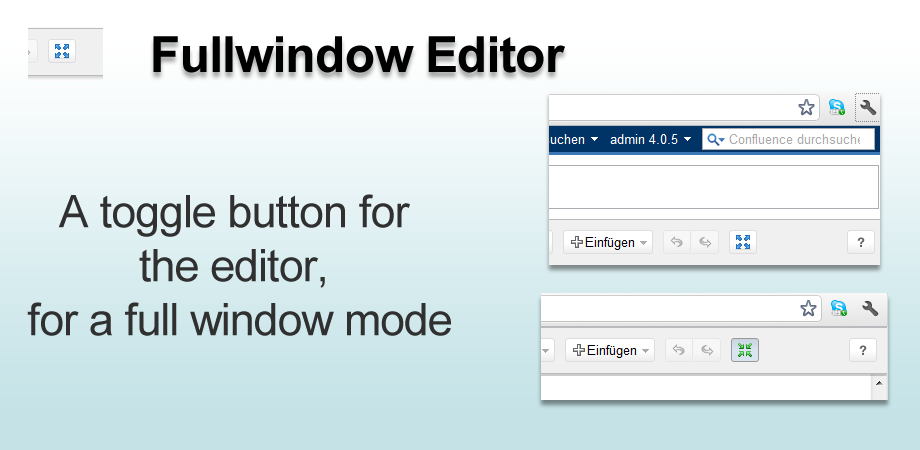
<style>
.page{position:relative;width:920px;height:450px;background:#ffffff}
.page>*{position:absolute;margin:0}
.t1{font:50px "Arial-BoldMT";letter-spacing:-0.025em;color:#000000}
.t2{font:45px "ArialMT";letter-spacing:-0.025em;color:#303030}
</style>
<div class="page">
<p class="t1" style="left:153px;top:36px;width:412px;height:37px">Fullwindow Editor</p>
<p class="t2" style="left:27px;top:194px;width:424px;height:142px;text-align:center">A toggle button for <br>the editor, <br>for a full window mode</p>
</div>
